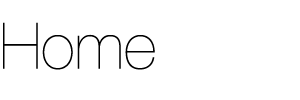
<style>
.page{position:relative;width:300px;height:100px;background:#ffffff}
.page>*{position:absolute;margin:0}
.t1{font:64px "HelveticaNeue-UltraLight";color:#000000}
</style>
<div class="page">
<p class="t1" style="left:3px;top:22px;width:152px;height:48px">Home</p>
</div>
